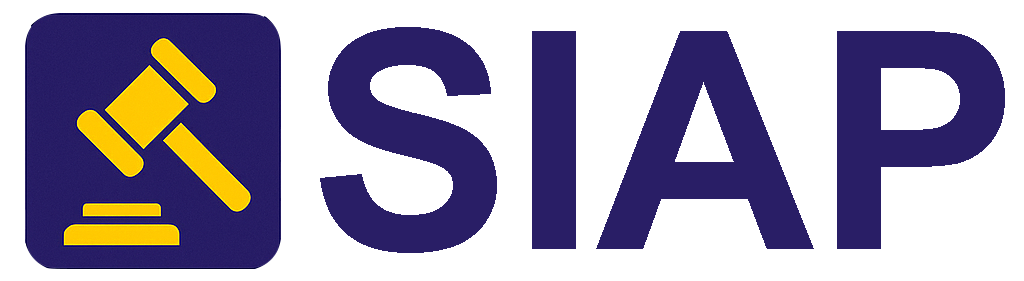
<style>
.page{position:relative;width:1024px;height:281px;background:#ffffff}
.page>*{position:absolute;margin:0}
.t1{font:303.8px "Arial-BoldMT";color:#291e66}
</style>
<div class="page">
<p class="t1" style="left:320px;top:27px;width:685px;height:226px">SIAP</p>
</div>
